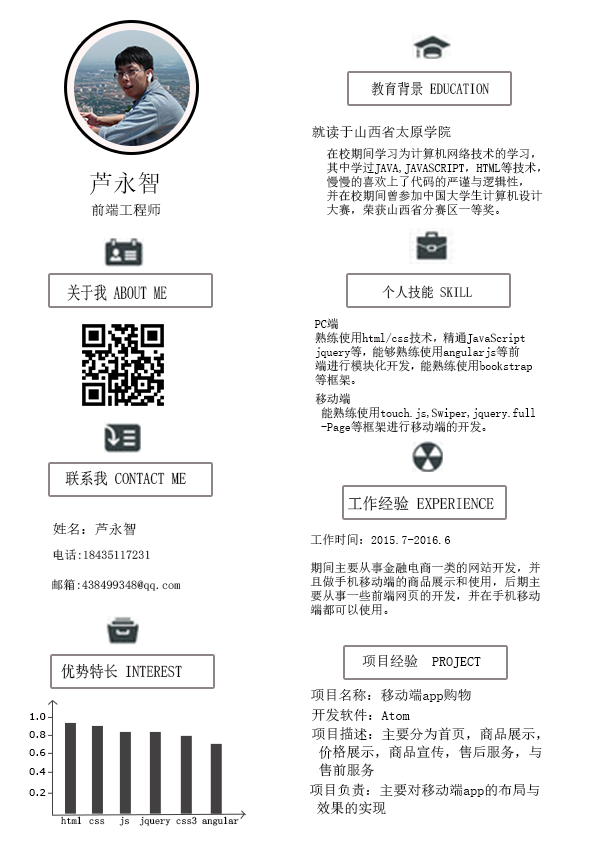
<style>
.page{position:relative;width:596px;height:842px;background:#ffffff}
.page>*{position:absolute;margin:0}
.t1{font:15px "SimSun";color:#090303;scale:0.87 1}
.t2{font:14px "SimSun";color:#090303}
.t3{font:12px/14px "SimSun";color:#090303}
.t4{font:24px "SimSun";color:#090303}
.t5{font:18px "SimSun";color:#090303;scale:0.74 1}
.t6{font:14px "SimSun";color:#090303;scale:0.92 1}
.t7{font:12px/14px "SimSun";letter-spacing:0.01em;color:#090303}
.t8{font:16px "SimSun";color:#090303;scale:0.89 1}
.t9{font:15.8px "SimSun";color:#090303}
.t10{font:12px "SimSun";color:#090303}
.t11{font:10.3px "Verdana";color:#090303}
.t12{font:14px/18px "SimSun";color:#090303}
.t13{font:10px "SimSun";color:#090303;scale:1.05 1}
.t14{font:10px "SimSun";scale:1.05 1}
</style>
<div class="page">
<p class="t1" style="left:371px;top:81px;width:118px;height:15px">教育背景 EDUCATION</p>
<p class="t2" style="left:312px;top:125px;width:139px;height:14px">就读于山西省太原学院</p>
<p class="t3" style="left:327px;top:148px;width:215px;height:68px">在校期间学习为计算机网络技术的学习，<br>其中学过JAVA,JAVASCRIPT，HTML等技术，<br>慢慢的喜欢上了代码的严谨与逻辑性，<br>并在校期间曾参加中国大学生计算机设计<br>大赛，荣获山西省分赛区一等奖。</p>
<p class="t4" style="left:90px;top:172px;width:69px;height:23px">芦永智</p>
<p class="t2" style="left:91px;top:203px;width:70px;height:14px">前端工程师</p>
<p class="t5" style="left:67px;top:284px;width:100px;height:17px">关于我 ABOUT ME</p>
<p class="t6" style="left:382px;top:285px;width:90px;height:14px">个人技能 SKILL</p>
<p class="t7" style="left:314px;top:318px;width:218px;height:68px">PC端 <br>熟练使用html/css技术，精通JavaScript<br>jquery等，能够熟练使用angularjs等前<br>端进行模块化开发，能熟练使用bookstrap <br>等框架。</p>
<p class="t7" style="left:315px;top:393px;width:220px;height:40px">移动端<br>  能熟练使用touch.js,Swiper,jquery.full<br>  -Page等框架进行移动端的开发。</p>
<p class="t8" style="left:65px;top:470px;width:121px;height:16px">联系我 CONTACT ME</p>
<p class="t9" style="left:348px;top:496px;width:146px;height:15px">工作经验 EXPERIENCE</p>
<p class="t2" style="left:53px;top:522px;width:83px;height:14px">姓名：芦永智</p>
<p class="t7" style="left:310px;top:534px;width:230px;height:82px">工作时间：2015.7-2016.6<br><br>期间主要从事金融电商一类的网站开发，并<br>且做手机移动端的商品展示和使用，后期主<br>要从事一些前端网页的开发，并在手机移动<br>端都可以使用。</p>
<p class="t10" style="left:53px;top:549px;width:97px;height:11px">电话:18435117231</p>
<p class="t10" style="left:52px;top:579px;width:129px;height:12px">邮箱:438499348@qq.com</p>
<p class="t2" style="left:362px;top:654px;width:119px;height:14px">项目经验  PROJECT</p>
<p class="t8" style="left:61px;top:663px;width:121px;height:16px">优势特长 INTEREST</p>
<p class="t2" style="left:311px;top:688px;width:160px;height:14px">项目名称：移动端app购物</p>
<p class="t11" style="left:30px;top:713px;width:16px;height:7px">1.0</p>
<p class="t2" style="left:312px;top:708px;width:98px;height:14px">开发软件：Atom</p>
<p class="t11" style="left:29px;top:731px;width:17px;height:7px">0.8</p>
<p class="t12" style="left:312px;top:727px;width:230px;height:50px">项目描述：主要分为首页，商品展示，<br> 价格展示，商品宣传，售后服务，与<br> 售前服务</p>
<p class="t11" style="left:29px;top:749px;width:17px;height:7px">0.6</p>
<p class="t11" style="left:29px;top:768px;width:17px;height:7px">0.4</p>
<p class="t12" style="left:310px;top:783px;width:230px;height:32px">项目负责：主要对移动端app的布局与<br> 效果的实现</p>
<p class="t11" style="left:29px;top:789px;width:17px;height:7px">0.2</p>
<p class="t13" style="left:61px;top:816px;width:21px;height:9px">html</p>
<p class="t14" style="left:89px;top:819px;width:16px;height:6px">css</p>
<p class="t14" style="left:119px;top:816px;width:10px;height:10px">js</p>
<p class="t13" style="left:139px;top:816px;width:32px;height:10px">jquery</p>
<p class="t13" style="left:176px;top:816px;width:21px;height:9px">css3</p>
<p class="t13" style="left:202px;top:816px;width:37px;height:10px">angular</p>
</div>
